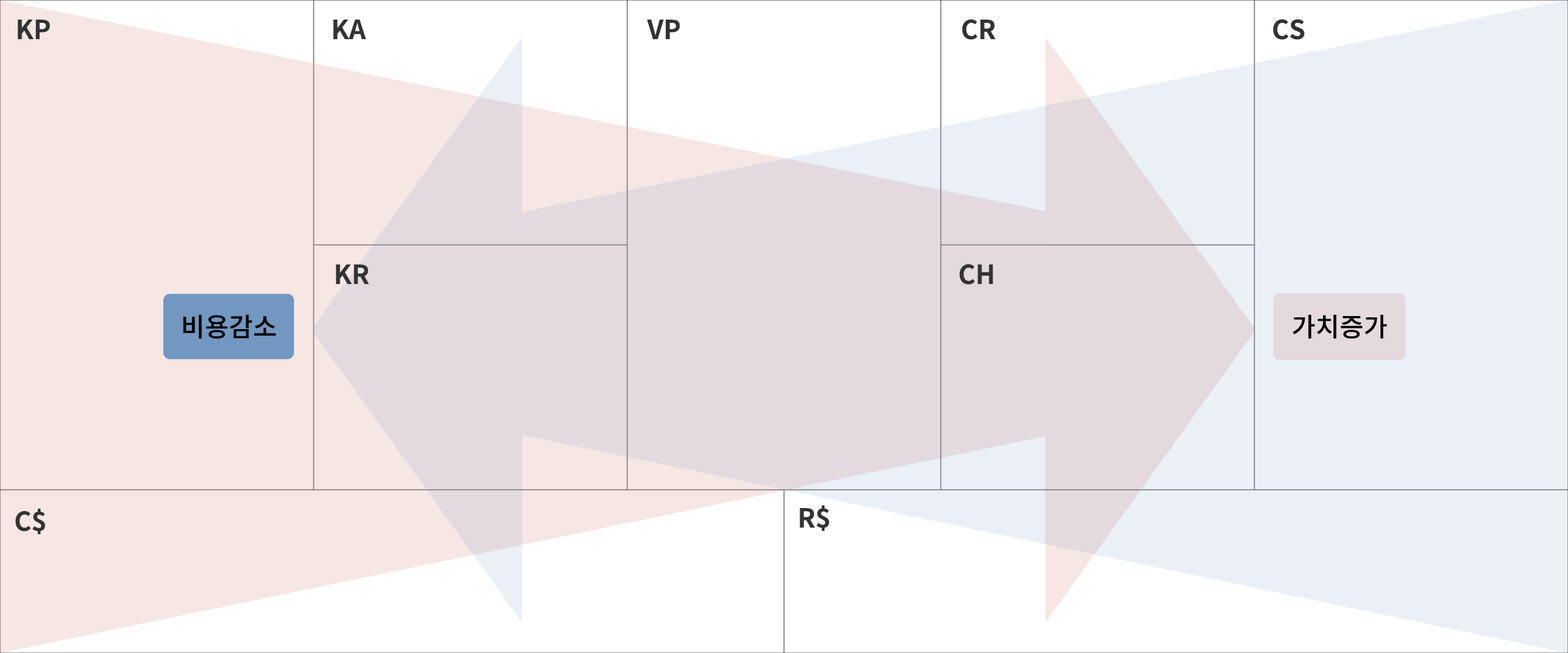
<style>
.page{position:relative;width:1568px;height:653px;background:#eaf0f6}
.page>*{position:absolute;margin:0}
.t1{font:26.1px "NotoSansCJKkr-Bold";color:#333333}
.t2{font:26.1px "NotoSansCJKkr-Medium";color:#000000}
</style>
<div class="page">
<p class="t1" style="left:18px;top:20px;width:32px;height:19px">KP</p>
<p class="t1" style="left:333px;top:20px;width:33px;height:19px">KA</p>
<p class="t1" style="left:647px;top:20px;width:33px;height:19px">VP</p>
<p class="t1" style="left:962px;top:19px;width:34px;height:21px">CR</p>
<p class="t1" style="left:1273px;top:19px;width:32px;height:21px">CS</p>
<p class="t1" style="left:336px;top:265px;width:33px;height:19px">KR</p>
<p class="t1" style="left:959px;top:264px;width:34px;height:21px">CH</p>
<p class="t2" style="left:183px;top:315px;width:93px;height:24px">비용감소</p>
<p class="t2" style="left:1292px;top:315px;width:95px;height:24px">가치증가</p>
<p class="t1" style="left:15px;top:509px;width:30px;height:25px">C$</p>
<p class="t1" style="left:800px;top:506px;width:29px;height:25px">R$</p>
</div>
